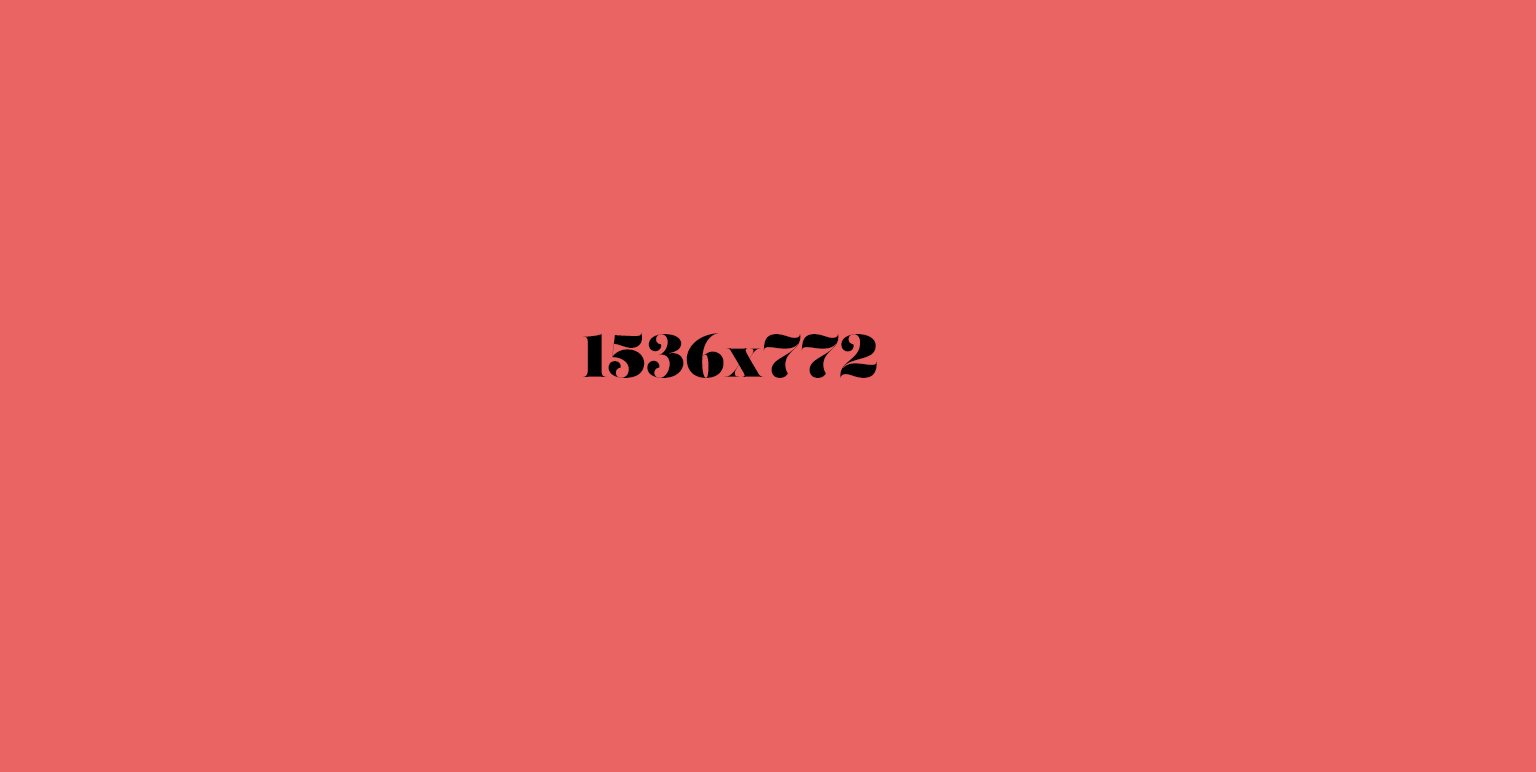
<style>
.page{position:relative;width:1536px;height:772px;background:#ea6464}
.page>*{position:absolute;margin:0}
.t1{font:60px "Salome-Fine";color:#000000}
</style>
<div class="page">
<p class="t1" style="left:583px;top:332px;width:294px;height:46px">1536x772</p>
</div>
